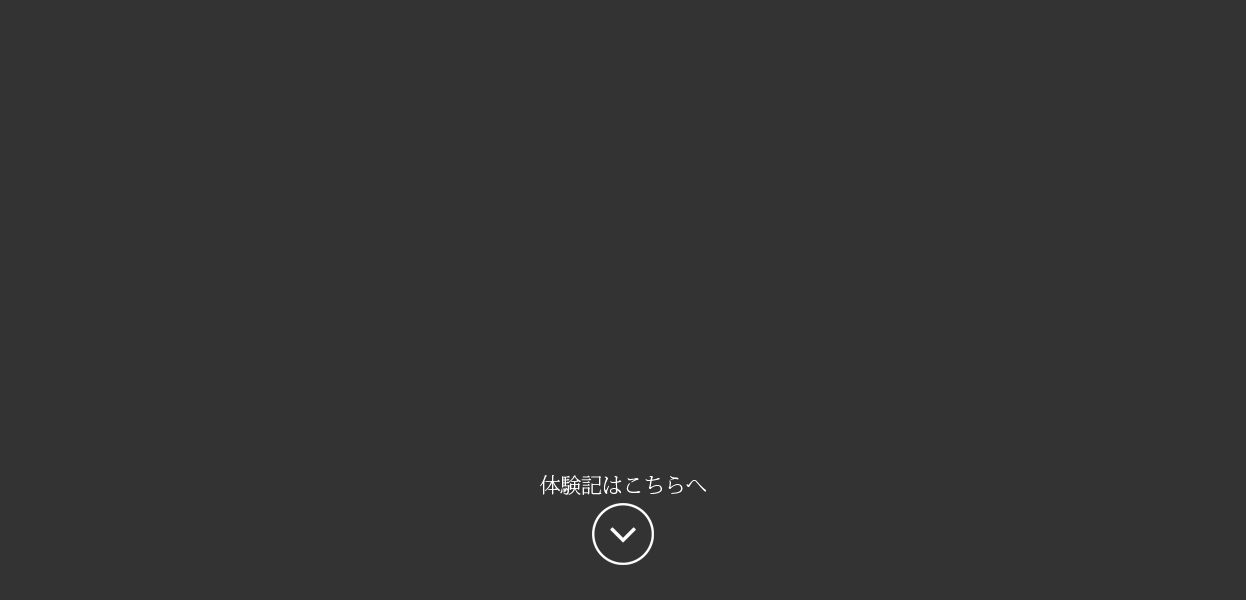
<style>
.page{position:relative;width:1246px;height:600px;background:#333333}
.page>*{position:absolute;margin:0}
.t1{font:20.8px "KozMinPr6N-ExtraLight";color:#fffffe}
</style>
<div class="page">
<p class="t1" style="left:540px;top:475px;width:166px;height:20px">体験記はこちらへ</p>
</div>
